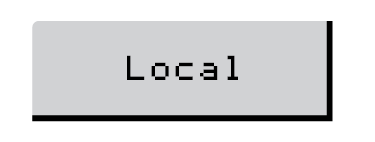
<style>
.page{position:relative;width:375px;height:142px;background:#d1d2d4}
.page>*{position:absolute;margin:0}
.t1{font:27.8px "Mono0756";color:#000000}
</style>
<div class="page">
<p class="t1" style="left:127px;top:55px;width:111px;height:25px">Local</p>
</div>
